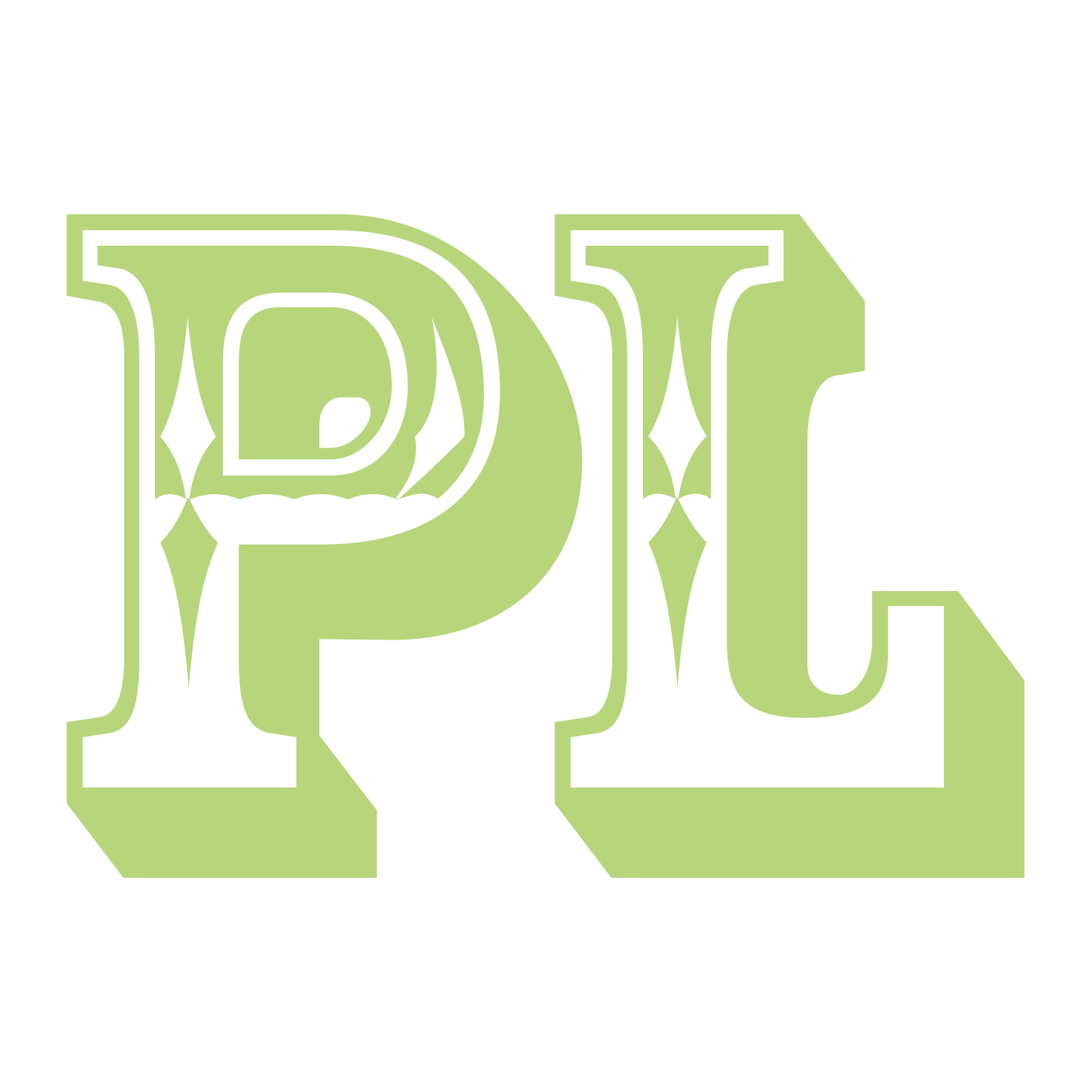
<style>
.page{position:relative;width:1092px;height:1092px;background:#ffffff}
.page>*{position:absolute;margin:0}
.t1{font:884.5px "RosewoodStd-Regular";color:#b7d67b}
</style>
<div class="page">
<p class="t1" style="left:66px;top:214px;width:958px;height:664px">Pl</p>
</div>
